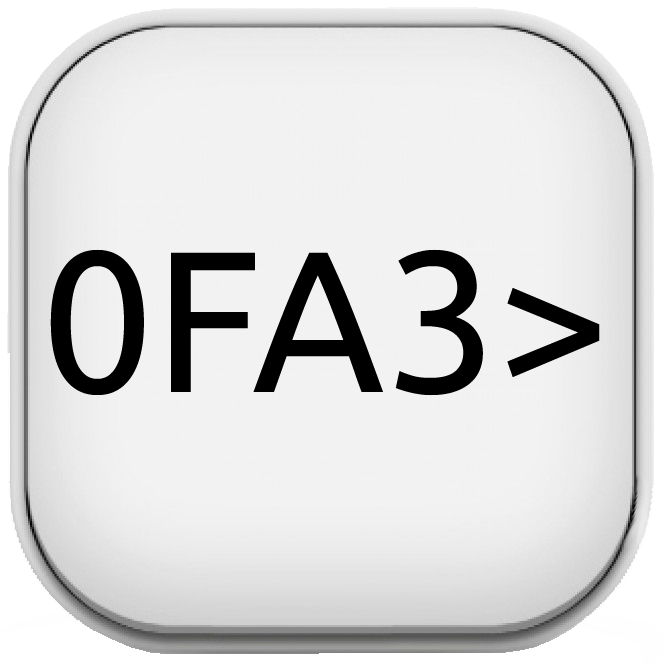
<style>
.page{position:relative;width:664px;height:664px;background:#f2f2f2}
.page>*{position:absolute;margin:0}
.t1{font:200px "Ubuntu";color:#000000}
</style>
<div class="page">
<p class="t1" style="left:50px;top:249px;width:550px;height:147px">0FA3&gt;</p>
</div>
